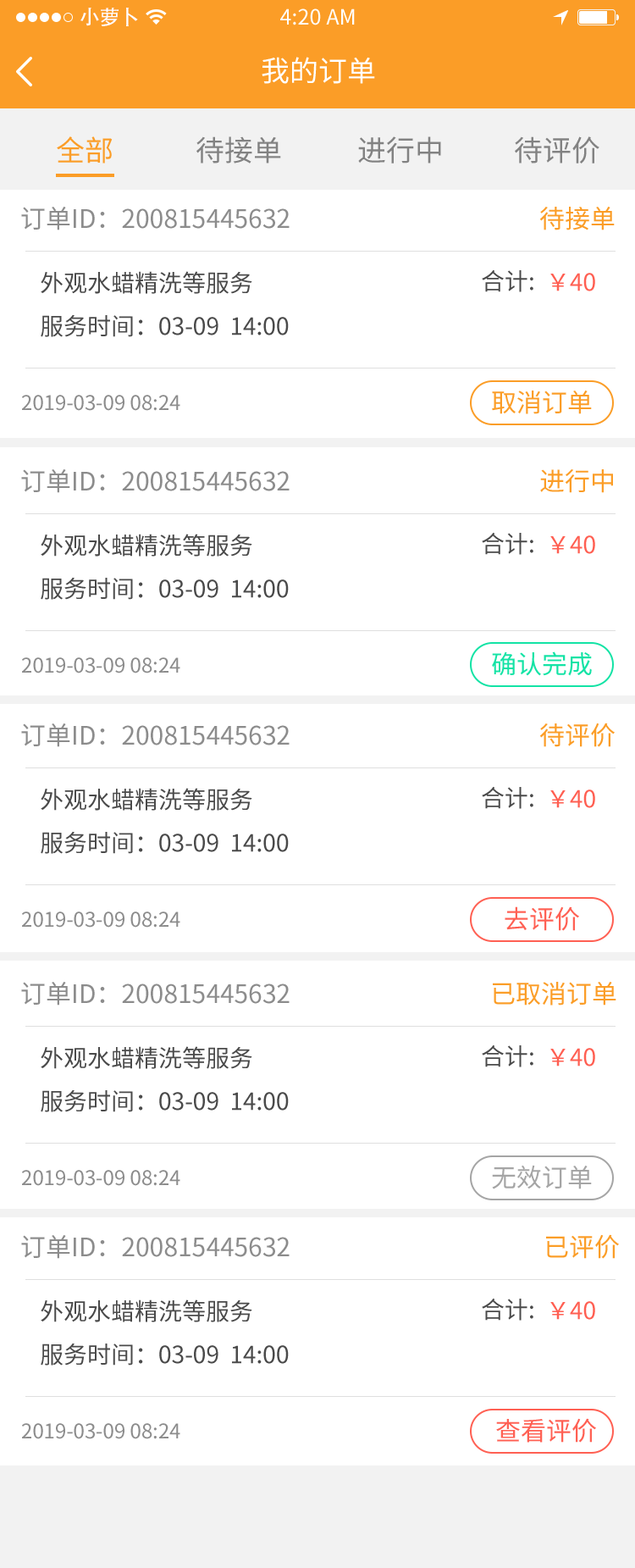
<style>
.page{position:relative;width:635px;height:1568px;background:#ffffff}
.page>*{position:absolute;margin:0}
.t1{font:20.3px "AdobeHeitiStd-Regular";color:#ffffff}
.t2{font:21.2px "SourceHanSansCN-Regular";color:#ffffff}
.t3{font:28.8px "SourceHanSansCN-Regular";color:#ffffff}
.t4{font:28.8px "SourceHanSansCN-Regular";color:#fb9d27}
.t5{font:28.8px "SourceHanSansCN-Regular";color:#828282}
.t6{font:25.4px "SourceHanSansCN-Regular";color:#8c8c8c}
.t7{font:25.4px "SourceHanSansCN-Regular";color:#fb9d27}
.t8{font:23.7px "SourceHanSansCN-Regular";color:#4a4a4a}
.t9{font:23.7px "SourceHanSansCN-Regular";color:#ff5f52}
.t10{font:20.3px "SourceHanSansCN-Regular";color:#8c8c8c}
.t11{font:25.4px "SourceHanSansCN-Regular";color:#13e3a5}
.t12{font:25.4px "SourceHanSansCN-Regular";color:#ff6053}
.t13{font:25.4px "SourceHanSansCN-Regular";color:#a5a5a5}
</style>
<div class="page">
<p class="t1" style="left:80px;top:8px;width:58px;height:18px">小萝卜</p>
<p class="t2" style="left:280px;top:8px;width:75px;height:17px">4:20 AM</p>
<p class="t3" style="left:262px;top:57px;width:113px;height:27px">我的订单</p>
<p class="t4" style="left:57px;top:136px;width:56px;height:27px">全部</p>
<p class="t5" style="left:197px;top:136px;width:84px;height:27px">待接单</p>
<p class="t5" style="left:358px;top:136px;width:83px;height:27px">进行中</p>
<p class="t5" style="left:515px;top:136px;width:85px;height:27px">待评价</p>
<p class="t6" style="left:21px;top:207px;width:269px;height:23px">订单ID：200815445632</p>
<p class="t7" style="left:540px;top:207px;width:75px;height:23px">待接单</p>
<p class="t8" style="left:482px;top:269px;width:52px;height:23px">合计:</p>
<p class="t8" style="left:41px;top:271px;width:211px;height:23px">外观水蜡精洗等服务</p>
<p class="t9" style="left:551px;top:273px;width:45px;height:18px">￥40</p>
<p class="t8" style="left:41px;top:314px;width:248px;height:23px">服务时间：03-09  14:00</p>
<p class="t10" style="left:22px;top:395px;width:158px;height:16px">2019-03-09 08:24</p>
<p class="t7" style="left:492px;top:391px;width:100px;height:23px">取消订单</p>
<p class="t6" style="left:21px;top:469px;width:269px;height:24px">订单ID：200815445632</p>
<p class="t7" style="left:540px;top:469px;width:73px;height:24px">进行中</p>
<p class="t8" style="left:41px;top:534px;width:211px;height:23px">外观水蜡精洗等服务</p>
<p class="t8" style="left:482px;top:532px;width:52px;height:23px">合计:</p>
<p class="t9" style="left:551px;top:535px;width:45px;height:19px">￥40</p>
<p class="t8" style="left:41px;top:577px;width:248px;height:23px">服务时间：03-09  14:00</p>
<p class="t11" style="left:492px;top:651px;width:100px;height:25px">确认完成</p>
<p class="t10" style="left:22px;top:657px;width:158px;height:16px">2019-03-09 08:24</p>
<p class="t6" style="left:21px;top:723px;width:269px;height:24px">订单ID：200815445632</p>
<p class="t7" style="left:540px;top:723px;width:75px;height:24px">待评价</p>
<p class="t8" style="left:41px;top:788px;width:211px;height:23px">外观水蜡精洗等服务</p>
<p class="t8" style="left:482px;top:786px;width:52px;height:23px">合计:</p>
<p class="t9" style="left:551px;top:790px;width:45px;height:18px">￥40</p>
<p class="t8" style="left:41px;top:831px;width:248px;height:23px">服务时间：03-09  14:00</p>
<p class="t10" style="left:22px;top:911px;width:158px;height:17px">2019-03-09 08:24</p>
<p class="t12" style="left:505px;top:906px;width:74px;height:25px">去评价</p>
<p class="t6" style="left:21px;top:982px;width:269px;height:24px">订单ID：200815445632</p>
<p class="t7" style="left:493px;top:982px;width:124px;height:24px">已取消订单</p>
<p class="t8" style="left:41px;top:1046px;width:211px;height:23px">外观水蜡精洗等服务</p>
<p class="t8" style="left:482px;top:1044px;width:52px;height:23px">合计:</p>
<p class="t9" style="left:551px;top:1048px;width:45px;height:19px">￥40</p>
<p class="t8" style="left:41px;top:1089px;width:248px;height:23px">服务时间：03-09  14:00</p>
<p class="t10" style="left:22px;top:1170px;width:158px;height:16px">2019-03-09 08:24</p>
<p class="t13" style="left:492px;top:1165px;width:100px;height:24px">无效订单</p>
<p class="t6" style="left:21px;top:1235px;width:269px;height:24px">订单ID：200815445632</p>
<p class="t7" style="left:546px;top:1234px;width:73px;height:25px">已评价</p>
<p class="t8" style="left:41px;top:1299px;width:211px;height:23px">外观水蜡精洗等服务</p>
<p class="t8" style="left:482px;top:1298px;width:52px;height:23px">合计:</p>
<p class="t9" style="left:551px;top:1301px;width:45px;height:19px">￥40</p>
<p class="t8" style="left:41px;top:1343px;width:248px;height:23px">服务时间：03-09  14:00</p>
<p class="t12" style="left:496px;top:1418px;width:100px;height:25px">查看评价</p>
<p class="t10" style="left:22px;top:1423px;width:158px;height:16px">2019-03-09 08:24</p>
</div>
